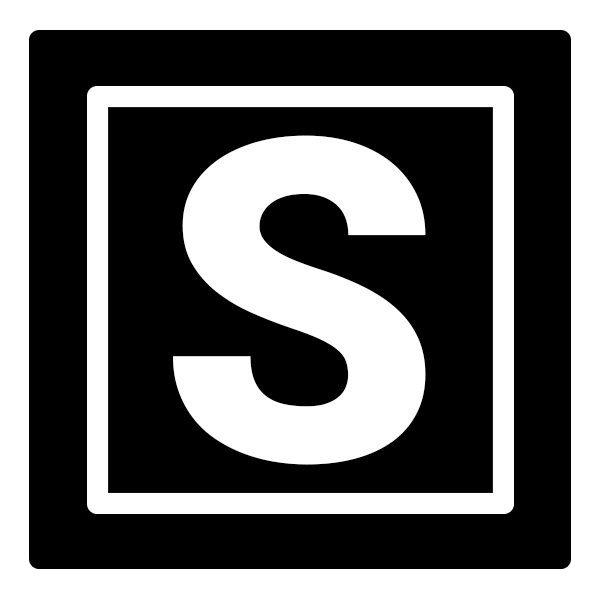
<style>
.page{position:relative;width:600px;height:600px;background:#000000}
.page>*{position:absolute;margin:0}
.t1{font:450px "Roboto-Black";color:#ffffff}
</style>
<div class="page">
<p class="t1" style="left:173px;top:135px;width:253px;height:330px">S</p>
</div>
